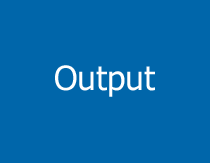
<style>
.page{position:relative;width:210px;height:163px;background:#0066aa}
.page>*{position:absolute;margin:0}
.t1{font:33.2px "Tahoma";color:#ffffff}
</style>
<div class="page">
<p class="t1" style="left:55px;top:65px;width:100px;height:32px">Output</p>
</div>
